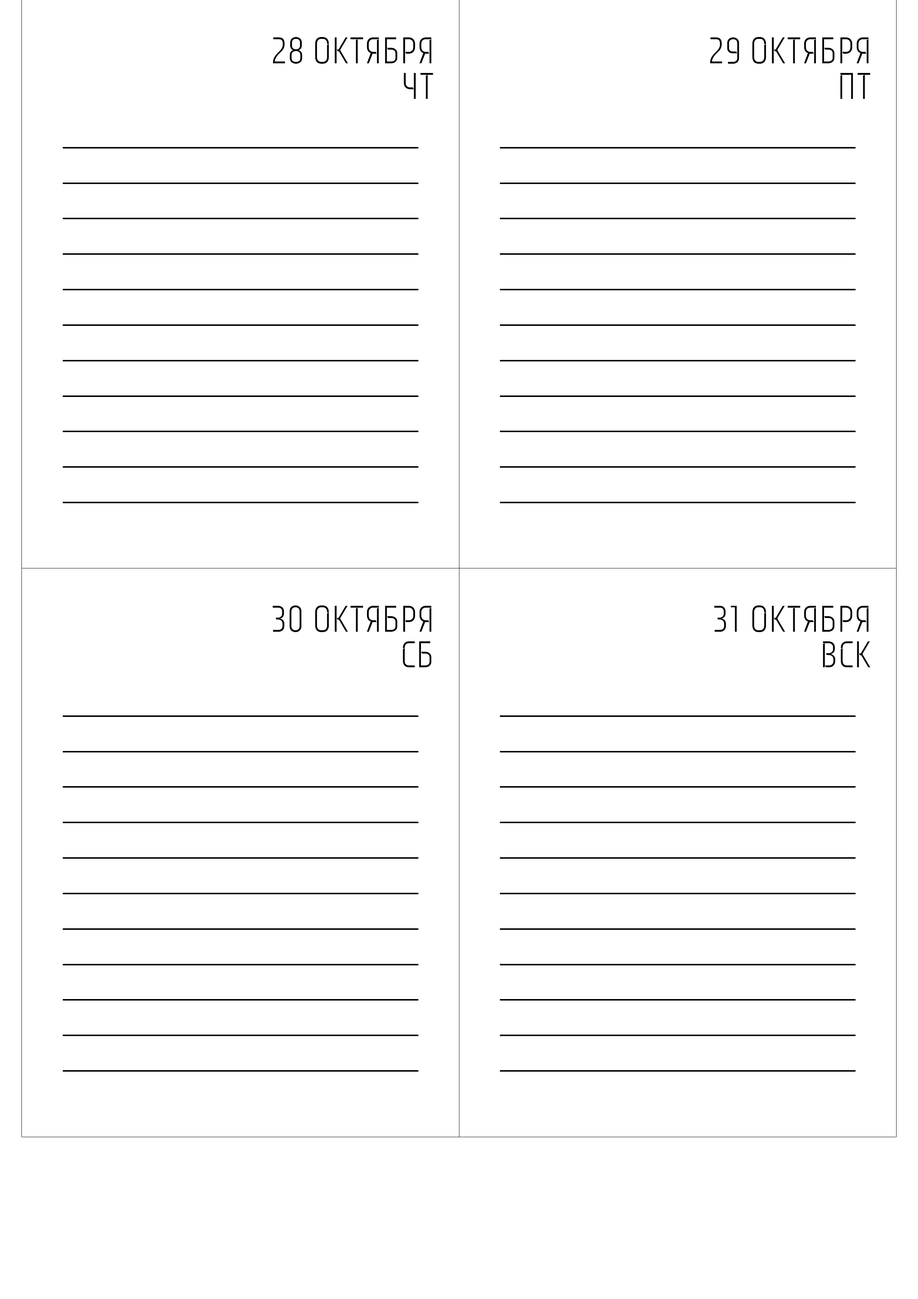
<style>
.page{position:relative;width:918px;height:1299px;background:#ffffff}
.page>*{position:absolute;margin:0}
.t1{font:37px/35.5px "Monitorca";letter-spacing:0.02em;color:#000000}
</style>
<div class="page">
<p class="t1" style="left:273px;top:37px;width:160px;height:62px;text-align:right">28 ОКТЯБРЯ<br>ЧТ</p>
<p class="t1" style="left:710px;top:37px;width:160px;height:62px;text-align:right">29 ОКТЯБРЯ<br>ПТ</p>
<p class="t1" style="left:272px;top:605px;width:160px;height:62px;text-align:right">30 ОКТЯБРЯ<br>СБ</p>
<p class="t1" style="left:714px;top:605px;width:156px;height:62px;text-align:right">31 ОКТЯБРЯ<br>ВСК</p>
</div>
